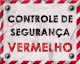
<style>
.page{position:relative;width:80px;height:64px}
.page>*{position:absolute;margin:0}
.t1{font:9.3px/13.3px "CenturyGothic-Bold";letter-spacing:0.005em;text-transform:uppercase;font-weight:bold}
.t2{font:12px/16px "CenturyGothic-Bold";letter-spacing:0.005em;text-transform:uppercase;font-weight:bold}
</style>
<div class="page">
<p class="t1" style="left:7px;top:15px;width:66px;height:37px;text-align:center">CONTROLE DE<br>SEGURANÇA<br><span class="t2">vermelho</span></p>
</div>
